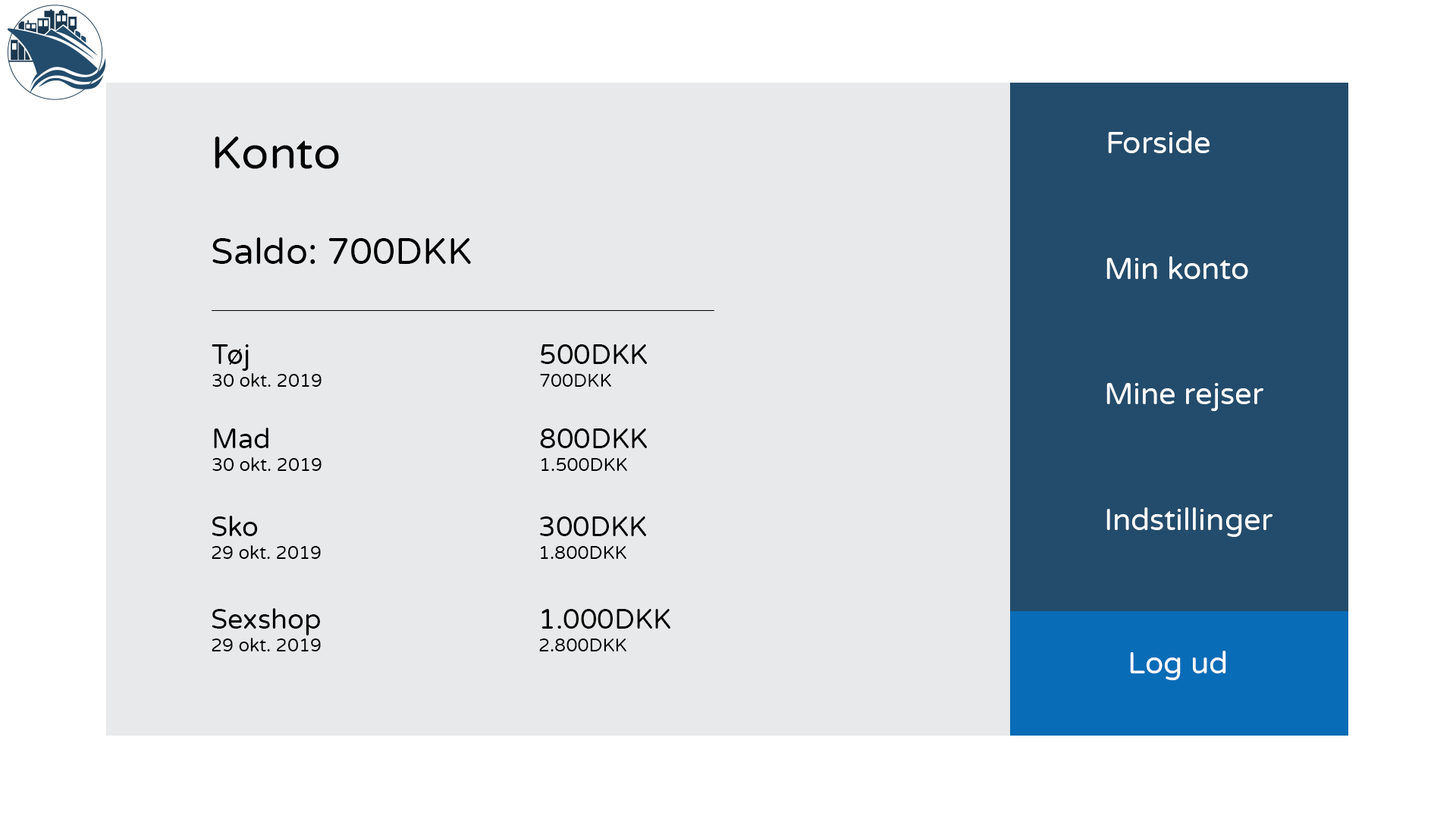
<style>
.page{position:relative;width:1456px;height:819px;background:#e8e9ea}
.page>*{position:absolute;margin:0}
.t1{font:45.5px "VarelaRound-Regular";color:#000000}
.t2{font:30.3px "VarelaRound-Regular";color:#ffffff}
.t3{font:36.4px "VarelaRound-Regular";color:#000000}
.t4{font:18.2px/22.7px "VarelaRound-Regular";color:#000000}
.t5{font:27.3px/22.7px "VarelaRound-Regular";color:#000000}
</style>
<div class="page">
<p class="t1" style="left:215px;top:136px;width:124px;height:33px">Konto</p>
<p class="t2" style="left:1108px;top:130px;width:102px;height:23px">Forside</p>
<p class="t3" style="left:212px;top:237px;width:259px;height:27px">Saldo: 700DKK</p>
<p class="t2" style="left:1106px;top:256px;width:142px;height:23px">Min konto</p>
<p class="t4" style="left:212px;top:344px;width:435px;height:43px"><span class="t5">Tøj           500DKK<br></span>30 okt. 2019        700DKK</p>
<p class="t2" style="left:1106px;top:383px;width:157px;height:28px">Mine rejser</p>
<p class="t4" style="left:212px;top:428px;width:435px;height:43px"><span class="t5">Mad          800DKK<br></span>30 okt. 2019        1.500DKK</p>
<p class="t2" style="left:1106px;top:507px;width:166px;height:30px">Indstillinger</p>
<p class="t4" style="left:212px;top:516px;width:434px;height:43px"><span class="t5">Sko           300DKK<br></span>29 okt. 2019        1.800DKK</p>
<p class="t4" style="left:212px;top:608px;width:458px;height:43px"><span class="t5">Sexshop        1.000DKK<br></span>29 okt. 2019        2.800DKK</p>
<p class="t2" style="left:1130px;top:651px;width:96px;height:29px">Log ud</p>
</div>
